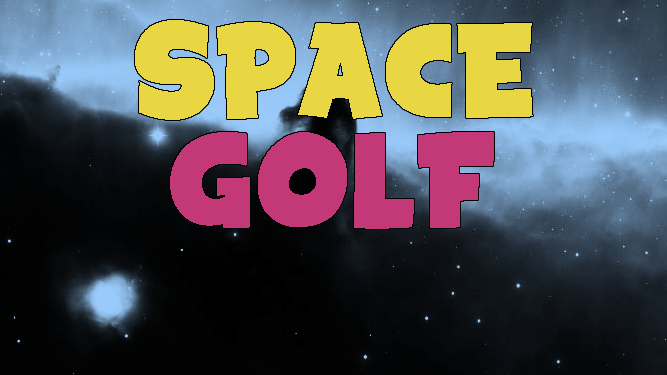
<style>
.page{position:relative;width:667px;height:375px}
.page>*{position:absolute;margin:0}
.t1{font:72px "SpaceComics";color:#e8d742}
.t2{font:72px "SpaceComics";color:#c33877}
</style>
<div class="page">
<p class="t1" style="left:135px;top:20px;width:398px;height:100px">SPACE</p>
<p class="t2" style="left:170px;top:132px;width:324px;height:97px">GOLF</p>
</div>
